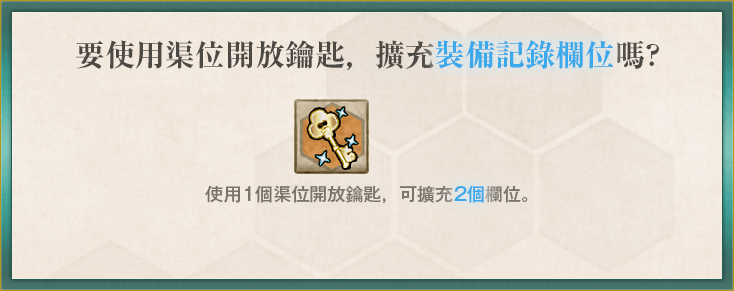
<style>
.page{position:relative;width:734px;height:291px}
.page>*{position:absolute;margin:0}
.t1{font:30px "RyuminPr6N-ExBold";color:#4c4843}
.t2{font:30px "RyuminPr6N-ExBold";color:#3ca9ed}
.t3{font:18px "GothicMB101Pr6N-Medium";color:#79736c}
.t4{font:18px "GothicMB101Pr6N-Medium";color:#3ca9ed}
</style>
<div class="page">
<p class="t1" style="left:76px;top:40px;width:583px;height:31px">要使用渠位開放鑰匙，擴充裝備記錄欄位嗎?</p>
<p class="t2" style="left:435px;top:40px;width:178px;height:29px">裝備記錄欄位</p>
<p class="t3" style="left:205px;top:185px;width:323px;height:18px">使用1個渠位開放鑰匙，可擴充2個欄位。</p>
<p class="t4" style="left:454px;top:185px;width:30px;height:18px">2個</p>
</div>
